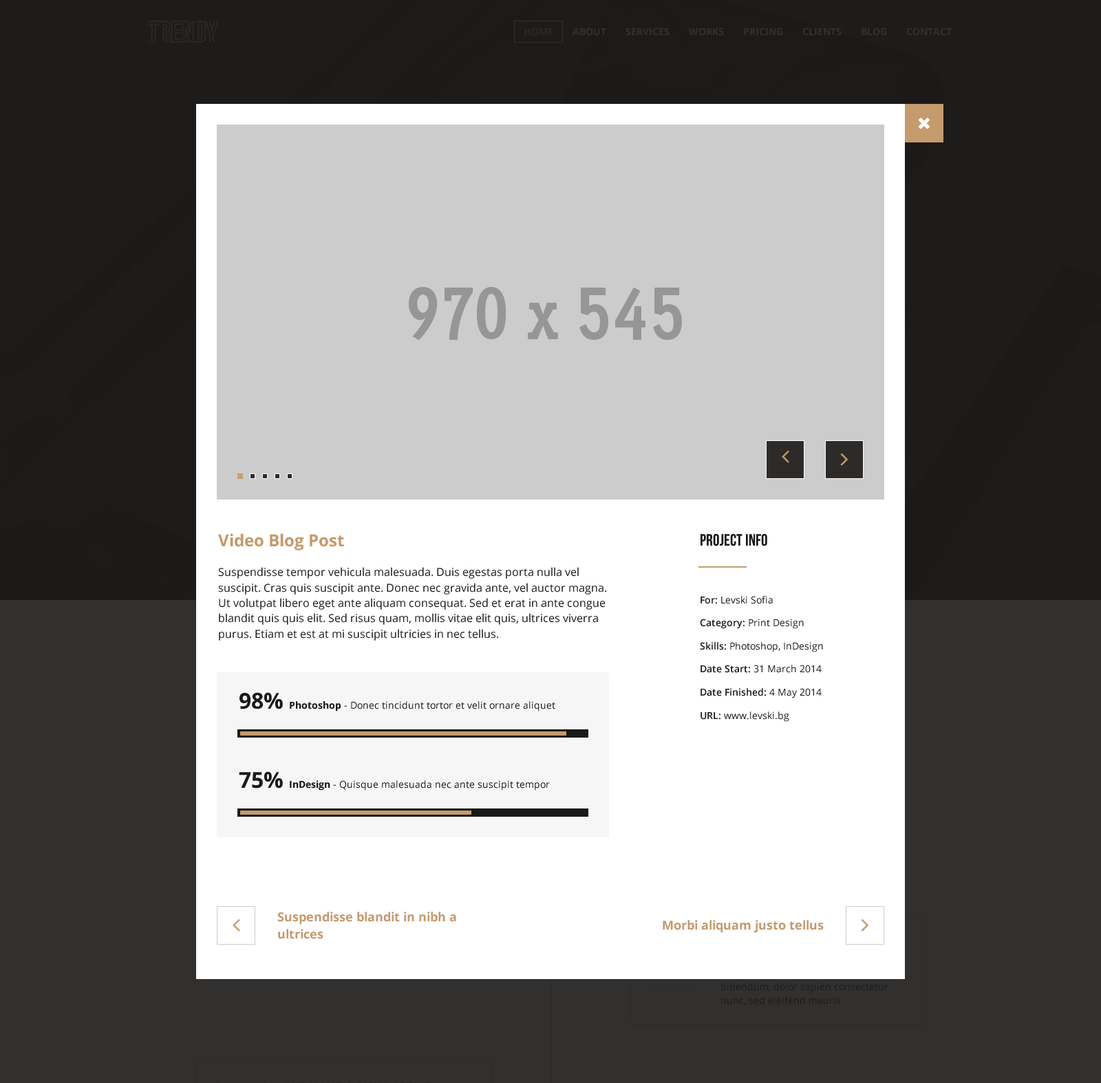
<style>
.page{position:relative;width:1101px;height:1083px;background:#ffffff}
.page>*{position:absolute;margin:0}
.t1{font:16.5px "OpenSans-Bold";color:#c5996c}
.t2{font:16.5px "BebasNeue";color:#191918}
.t3{font:11px/15.4px "OpenSans";color:#191918}
.t4{font:9.6px/11.6px "OpenSans";color:#191918}
.t5{font:9.6px/11.6px "OpenSans-Semibold";color:#191918}
.t6{font:9.6px "OpenSans";color:#191918}
.t7{font:22px "OpenSans-Bold";color:#191918}
.t8{font:9.6px "OpenSans-Bold";color:#191918}
.t9{font:12.4px/17.3px "OpenSans-Bold";color:#c5996c}
.t10{font:12.4px "OpenSans-Bold";color:#c5996c}
</style>
<div class="page">
<p class="t1" style="left:218px;top:533px;width:126px;height:17px">Video Blog Post</p>
<p class="t2" style="left:700px;top:534px;width:67px;height:12px">PROJECT INFO</p>
<p class="t3" style="left:218px;top:567px;width:388px;height:74px">Suspendisse tempor vehicula malesuada. Duis egestas porta nulla vel suscipit. Cras quis suscipit ante. Donec nec gravida ante, vel auctor magna. Ut volutpat libero eget ante aliquam consequat. Sed et erat in ante congue blandit quis quis elit. Sed risus quam, mollis vitae elit quis, ultrices viverra purus. Etiam et est at mi suscipit ultricies in nec tellus.</p>
<p class="t4" style="left:700px;top:596px;width:123px;height:126px"><span class="t5">For:</span> Levski Sofia<br><br><span class="t5">Category:</span> Print Design<br><br><span class="t5">Skills:</span> Photoshop, InDesign<br><br><span class="t5">Date Start:</span> 31 March 2014<br><br><span class="t5">Date Finished:</span> 4 May 2014<br><br><span class="t5">URL:</span> www.levski.bg</p>
<p class="t6" style="left:239px;top:692px;width:316px;height:20px"><span class="t7">98% </span><span class="t8">Photoshop</span> - Donec tincidunt tortor et velit ornare aliquet</p>
<p class="t6" style="left:239px;top:771px;width:311px;height:20px"><span class="t7">75% </span><span class="t8">InDesign</span> - Quisque malesuada nec ante suscipit tempor</p>
<p class="t9" style="left:277px;top:912px;width:179px;height:27px">Suspendisse blandit in nibh a ultrices</p>
<p class="t10" style="left:663px;top:920px;width:161px;height:13px">Morbi aliquam justo tellus</p>
</div>
